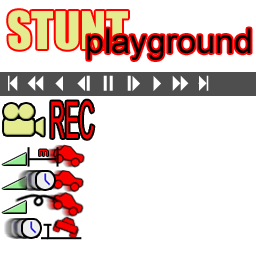
<style>
.page{position:relative;width:256px;height:256px;background:#ffffff}
.page>*{position:absolute;margin:0}
.t1{font:48px "Impact";color:#e4ec8f}
.t2{font:34px "ArialMT";color:#000000}
.t3{font:50.7px "Small Fonts";color:#f80000;scale:0.42 1}
.t4{font:12px "Small Fonts";color:#ff0000}
</style>
<div class="page">
<p class="t1" style="left:8px;top:10px;width:120px;height:40px">STUNT</p>
<p class="t2" style="left:87px;top:28px;width:164px;height:32px">playground</p>
<p class="t3" style="left:51px;top:100px;width:43px;height:39px">REC</p>
<p class="t4" style="left:39px;top:149px;width:9px;height:7px">m</p>
</div>
